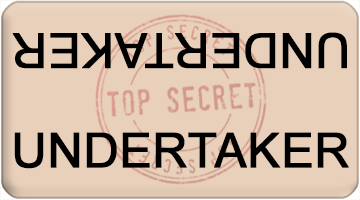
<style>
.page{position:relative;width:360px;height:200px;background:#e8d0bb}
.page>*{position:absolute;margin:0}
.t1{font:48px "ArialMT";color:#000000;font-weight:bold}
</style>
<div class="page">
<p class="t1" style="left:12px;top:32px;width:335px;height:37px;rotate:180deg">UNDERTAKER</p>
<p class="t1" style="left:14px;top:132px;width:335px;height:37px">UNDERTAKER</p>
</div>
